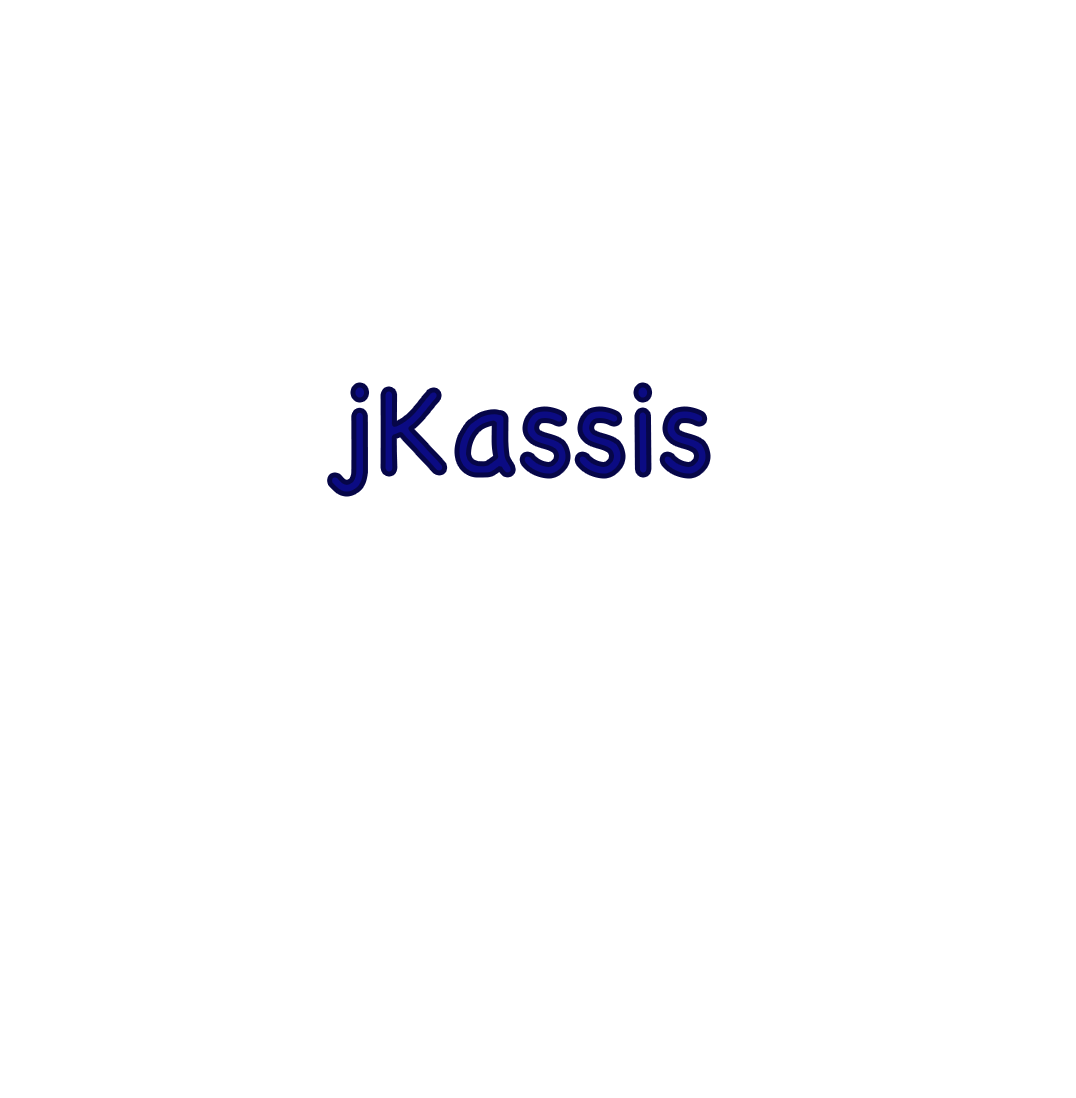
<style>
.page{position:relative;width:1076px;height:1098px;background:#ffffff}
.page>*{position:absolute;margin:0}
.t1{font:125.9px "Chalkboard"}
</style>
<div class="page">
<p class="t1" style="left:329px;top:385px;width:379px;height:109px">jKassis</p>
</div>
